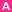
<style>
.page{position:relative;width:12px;height:12px;background:#ff2789}
.page>*{position:absolute;margin:0}
.t1{font:12px "ProximaNova-Regular";color:#ffffff}
</style>
<div class="page">
<p class="t1" style="left:2px;top:2px;width:8px;height:8px">А</p>
</div>
